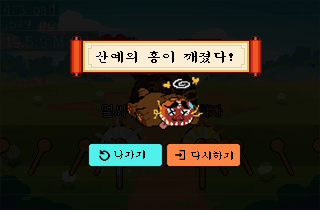
<style>
.page{position:relative;width:320px;height:210px}
.page>*{position:absolute;margin:0}
.t1{font:15px "D2Codingligature";color:#0a1617}
.t2{font:15px "D2Codingligature";color:#0d1617}
.t3{font:14.7px "Sam3KRFont";color:#000000}
.t4{font:12.9px "Gulim";color:#191919}
.t5{font:11px "Sam3KRFont";color:#000000}
</style>
<div class="page">
<p class="t1" style="left:3px;top:4px;width:52px;height:13px">4:3 pad</p>
<p class="t2" style="left:3px;top:19px;width:51px;height:12px">16:9 pc</p>
<p class="t3" style="left:96px;top:51px;width:137px;height:12px">산예의 흥이 깨졌다!</p>
<p class="t4" style="left:102px;top:105px;width:36px;height:12px">얼씨구</p>
<p class="t5" style="left:114px;top:150px;width:31px;height:9px">나가기</p>
<p class="t5" style="left:191px;top:151px;width:42px;height:9px">다시하기</p>
</div>
